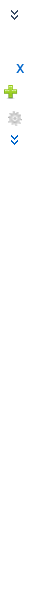
<style>
.page{position:relative;width:30px;height:600px;background:#ffffff}
.page>*{position:absolute;margin:0}
.t1{font:16px "ArialMT";color:#0066cc}
</style>
<div class="page">
<p class="t1" style="left:16px;top:64px;width:8px;height:9px">x</p>
</div>
